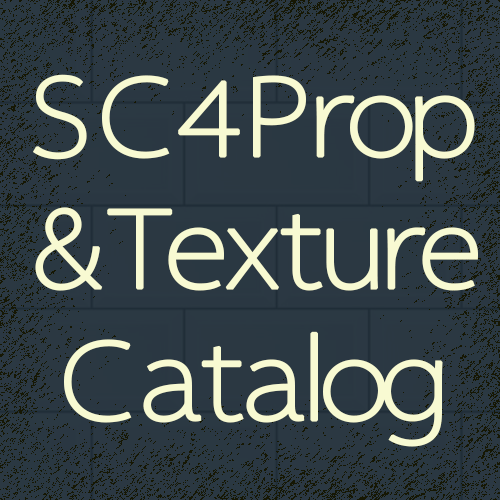
<style>
.page{position:relative;width:500px;height:500px;background:#2b3842}
.page>*{position:absolute;margin:0}
.t1{font:110px "MyriadCAD";letter-spacing:-0.13em;color:#f8fad2;font-weight:bold}
</style>
<div class="page">
<p class="t1" style="left:33px;top:74px;width:445px;height:373px;text-align:center">SC4Prop<br>&amp;Texture<br>Catalog</p>
</div>
